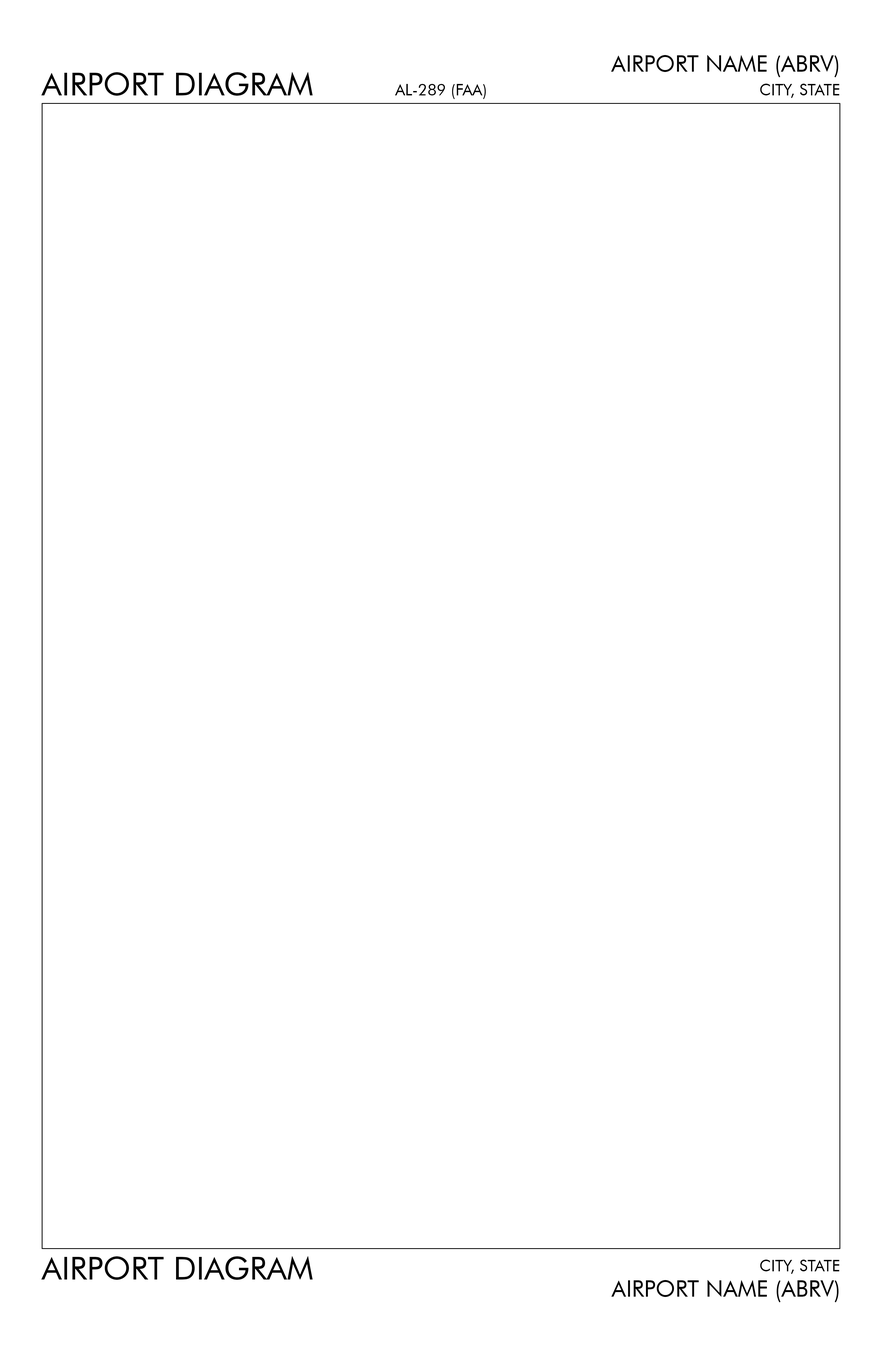
<style>
.page{position:relative;width:882px;height:1352px;background:#ffffff}
.page>*{position:absolute;margin:0}
.t1{font:22.7px "FuturaBT-Book";color:#000000}
.t2{font:31.8px "FuturaBT-Book";color:#000000}
.t3{font:15.9px "FuturaBT-Book";color:#000000}
</style>
<div class="page">
<p class="t1" style="left:611px;top:55px;width:227px;height:22px">AIRPORT NAME (ABRV)</p>
<p class="t2" style="left:41px;top:72px;width:272px;height:24px">AIRPORT DIAGRAM</p>
<p class="t3" style="left:395px;top:84px;width:91px;height:15px">AL-289 (FAA)</p>
<p class="t3" style="left:760px;top:84px;width:79px;height:14px">CITY, STATE</p>
<p class="t2" style="left:41px;top:1256px;width:272px;height:24px">AIRPORT DIAGRAM</p>
<p class="t3" style="left:760px;top:1260px;width:79px;height:14px">CITY, STATE</p>
<p class="t1" style="left:611px;top:1280px;width:228px;height:22px">AIRPORT NAME (ABRV)</p>
</div>
